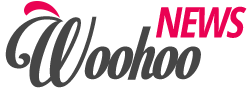
<style>
.page{position:relative;width:250px;height:90px;background:#ffffff}
.page>*{position:absolute;margin:0}
.t1{font:42.4px "OpenSans-CondensedBold";letter-spacing:-0.05em;color:#ea0253;text-transform:uppercase;font-style:italic}
.t2{font:87.3px "MotionPicturePersonalUse";letter-spacing:-0.025em;color:#464646}
</style>
<div class="page">
<p class="t1" style="left:156px;top:6px;width:91px;height:32px">News</p>
<p class="t2" style="left:5px;top:16px;width:196px;height:72px">Woohoo</p>
</div>
